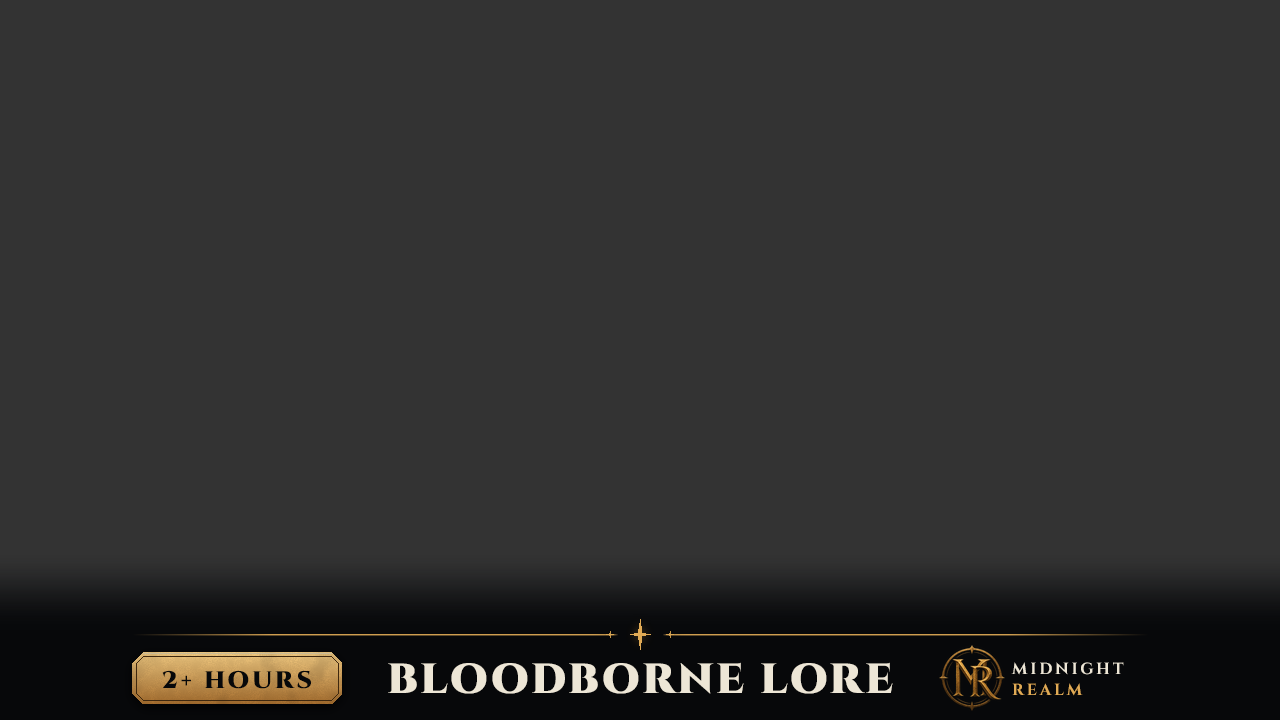
<style>
.page{position:relative;width:1280px;height:720px;background:#333333}
.page>*{position:absolute;margin:0}
.t1{font:42px "CinzelRoman-Black";letter-spacing:0.06em;color:#ede6d6}
.t2{font:16px "CinzelRoman-Bold";letter-spacing:0.18em;color:#ede6d6}
.t3{font:24px "CinzelRoman-Black";letter-spacing:0.12em;color:#07080a}
.t4{font:16px "CinzelRoman-Bold";letter-spacing:0.18em;color:#e0aa55}
</style>
<div class="page">
<p class="t1" style="left:388px;top:662px;width:505px;height:32px">BLOODBORNE LORE</p>
<p class="t2" style="left:1011px;top:662px;width:113px;height:13px">MIDNIGHT</p>
<p class="t3" style="left:162px;top:670px;width:149px;height:19px">2+ HOURS</p>
<p class="t4" style="left:1012px;top:683px;width:71px;height:13px">REALM</p>
</div>
